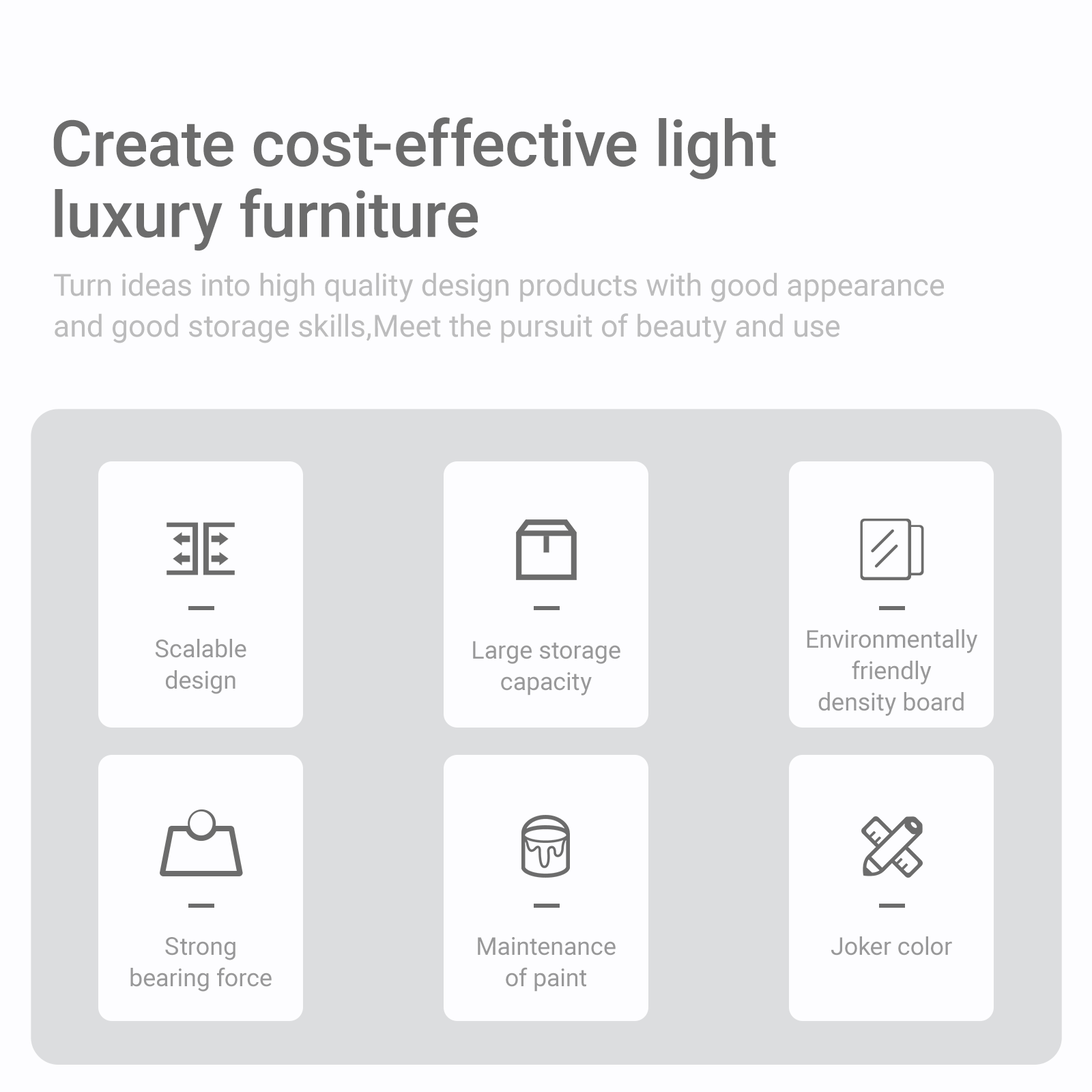
<style>
.page{position:relative;width:1092px;height:1092px;background:#fdfdff}
.page>*{position:absolute;margin:0}
.t1{font:64.1px/71px "Roboto-Medium";color:#6c6c6c}
.t2{font:30.6px/40.9px "Roboto-Regular";color:#bcbcbd}
.t3{font:24.6px/31.4px "Roboto-Regular";color:#989899}
.t4{font:24.6px "Roboto-Regular";color:#989899}
</style>
<div class="page">
<p class="t1" style="left:53px;top:117px;width:723px;height:134px">Create cost-effective light<br>luxury furniture</p>
<p class="t2" style="left:54px;top:272px;width:890px;height:71px">Turn ideas into high quality design products with good appearance<br>and good storage skills,Meet the pursuit of beauty and use</p>
<p class="t3" style="left:807px;top:629px;width:170px;height:87px;text-align:center">Environmentally<br>friendly<br>density board</p>
<p class="t3" style="left:155px;top:639px;width:91px;height:55px;text-align:center">Scalable<br>design</p>
<p class="t3" style="left:473px;top:641px;width:147px;height:54px;text-align:center">Large storage<br>capacity</p>
<p class="t3" style="left:130px;top:937px;width:142px;height:55px;text-align:center">Strong<br>bearing force</p>
<p class="t3" style="left:478px;top:937px;width:138px;height:55px;text-align:center">Maintenance<br>of paint</p>
<p class="t4" style="left:831px;top:936px;width:121px;height:19px">Joker color</p>
</div>
